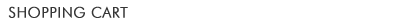
<style>
.page{position:relative;width:400px;height:24px;background:#ffffff}
.page>*{position:absolute;margin:0}
.t1{font:14.7px "FuturaBT-Light";letter-spacing:0.025em;color:#363636;text-transform:uppercase;font-weight:bold}
</style>
<div class="page">
<p class="t1" style="left:8px;top:6px;width:120px;height:12px">SHOPPING CART</p>
</div>
